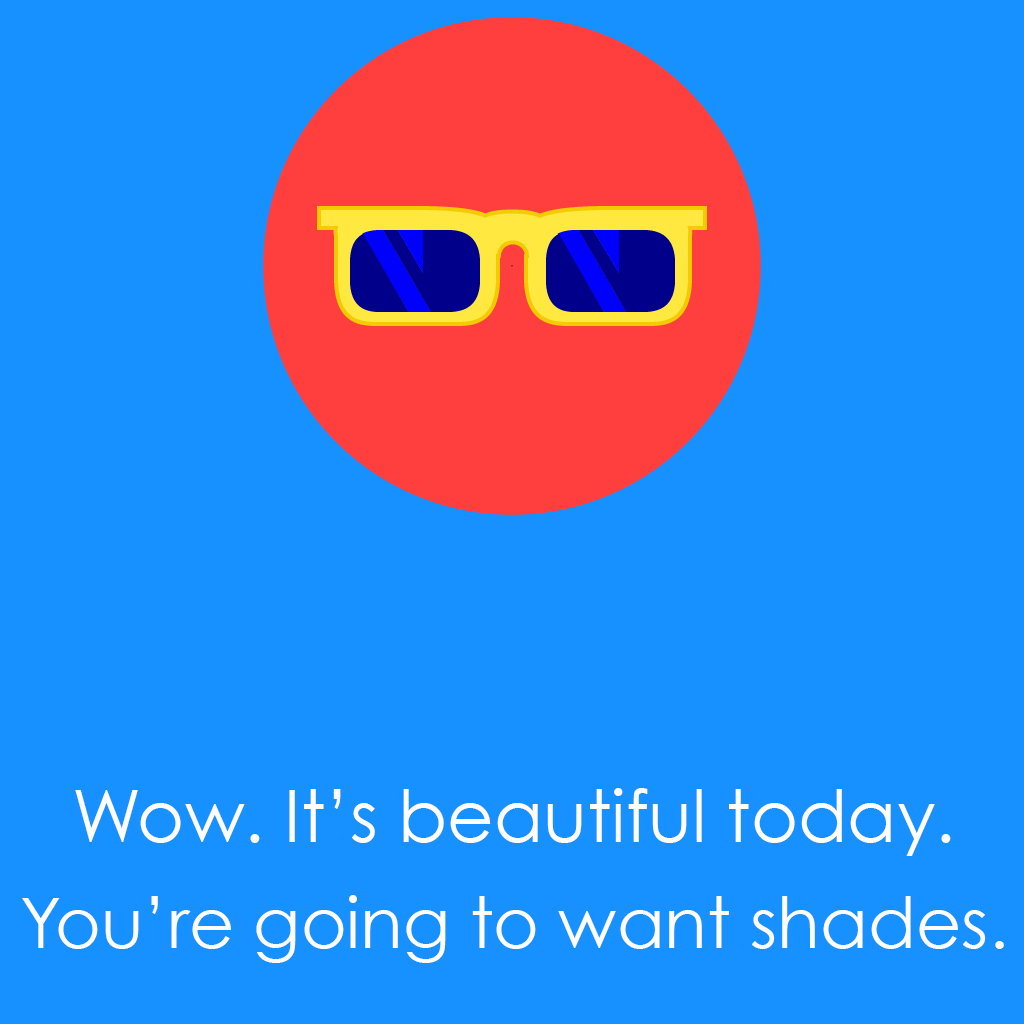
<style>
.page{position:relative;width:1024px;height:1024px;background:#1791ff}
.page>*{position:absolute;margin:0}
.t1{font:72px "CenturyGothic";color:#ffffff}
.t2{font:70px "CenturyGothic";color:#ffffff}
</style>
<div class="page">
<p class="t1" style="left:75px;top:788px;width:876px;height:68px">Wow. It’s beautiful today.</p>
<p class="t2" style="left:22px;top:895px;width:982px;height:68px">You’re going to want shades.</p>
</div>
